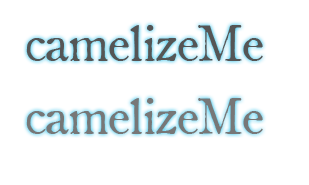
<style>
.page{position:relative;width:309px;height:185px;background:#ffffff}
.page>*{position:absolute;margin:0}
.t1{font:48px "OldStyle1HPLHS";letter-spacing:-0.005em;color:#555555}
.t2{font:48px "OldStyle1HPLHS";letter-spacing:-0.005em;color:#777777}
</style>
<div class="page">
<p class="t1" style="left:26px;top:25px;width:237px;height:36px">camelizeMe</p>
<p class="t2" style="left:26px;top:98px;width:237px;height:36px">camelizeMe</p>
</div>
